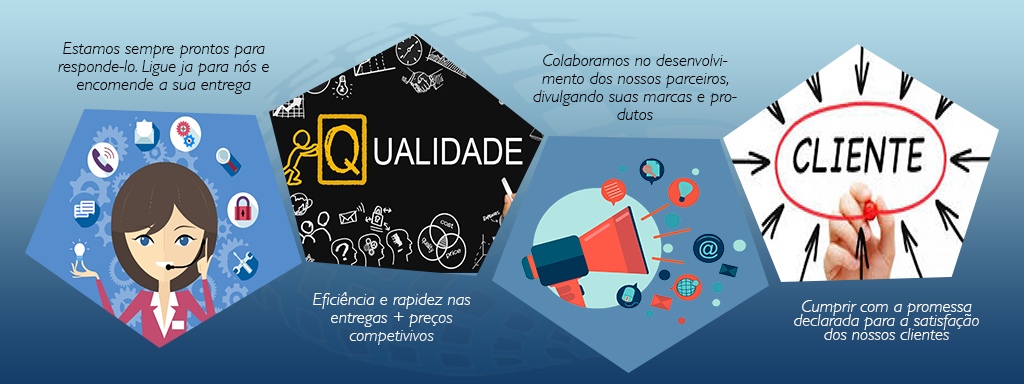
<style>
.page{position:relative;width:1024px;height:384px}
.page>*{position:absolute;margin:0}
.t1{font:18px/18px "GillSans-LightItalic";color:#000000}
.t2{font:18px/18px "GillSans-LightItalic";color:#fffefe}
.t3{font:11px/14px "ArialMT";color:#000000}
.t4{font:18px/14px "GillSans-LightItalic";color:#ffffff}
</style>
<div class="page">
<p class="t1" style="left:58px;top:42px;width:211px;height:52px;text-align:center">Estamos sempre prontos para responde-lo. Ligue ja para nós e encomende a sua entrega</p>
<p class="t1" style="left:533px;top:54px;width:204px;height:66px;text-align:center">Colaboramos no desenvolvimento dos nossos parceiros, divulgando suas marcas e produtos</p>
<p class="t2" style="left:313px;top:292px;width:158px;height:53px"><span class="t3"><br></span>Eficiência e rapidez nas entregas + preços competivivos</p>
<p class="t4" style="left:794px;top:300px;width:185px;height:40px;text-align:center">Cumprir com a promessa declarada para a satisfação dos nossos clientes</p>
</div>
